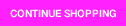
<style>
.page{position:relative;width:126px;height:26px;background:#ff22ff}
.page>*{position:absolute;margin:0}
.t1{font:10px "HelveticaNeue-Bold";color:#ffffff}
</style>
<div class="page">
<p class="t1" style="left:10px;top:9px;width:106px;height:9px">CONTINUE SHOPPING</p>
</div>
